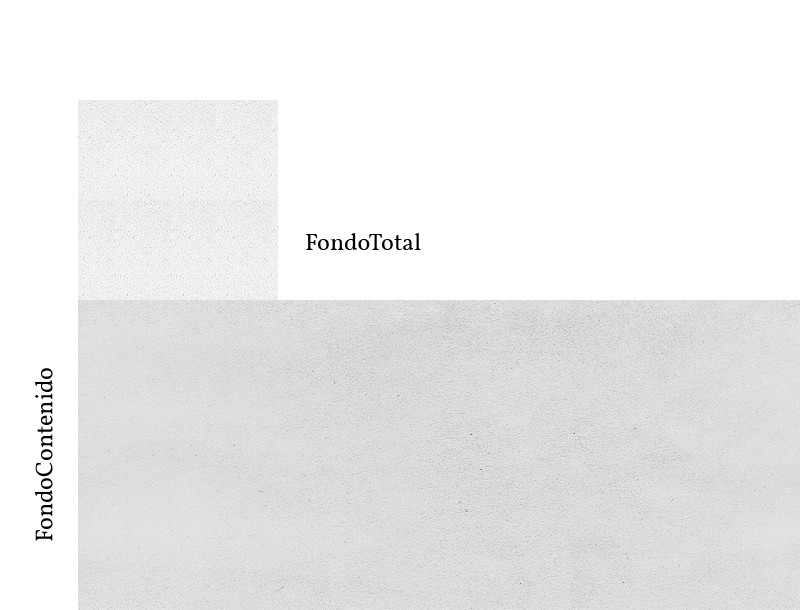
<style>
.page{position:relative;width:800px;height:610px;background:#ffffff}
.page>*{position:absolute;margin:0}
.t1{font:24px "Vollkorn-Regular";color:#000000}
.t2{font:24.3px "Vollkorn-Regular";color:#000000}
</style>
<div class="page">
<p class="t1" style="left:306px;top:233px;width:115px;height:17px">FondoTotal</p>
<p class="t2" style="left:34px;top:368px;width:19px;height:173px;rotate:-90deg">FondoContenido</p>
</div>
